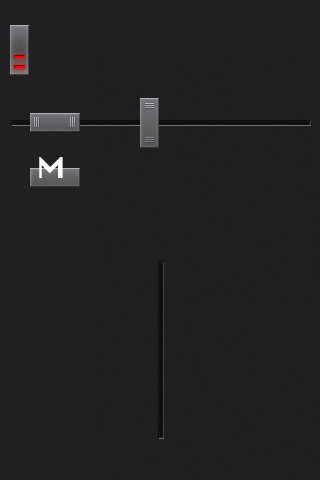
<style>
.page{position:relative;width:320px;height:480px;background:#1f1f21}
.page>*{position:absolute;margin:0}
.t1{font:28px "Silom";letter-spacing:0.06em;color:#ffffff}
</style>
<div class="page">
<p class="t1" style="left:39px;top:157px;width:24px;height:21px">M</p>
</div>
